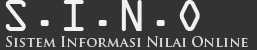
<style>
.page{position:relative;width:257px;height:50px;background:#333333}
.page>*{position:absolute;margin:0}
.t1{font:48px "OCRAExtended";color:#f1f1f0}
.t2{font:14px "TrajanPro-Bold";color:#dadada}
</style>
<div class="page">
<p class="t1" style="left:5px;top:0px;width:195px;height:31px">S.I.N.O</p>
<p class="t2" style="left:6px;top:36px;width:242px;height:11px">Sistem Informasi Nilai Online</p>
</div>
